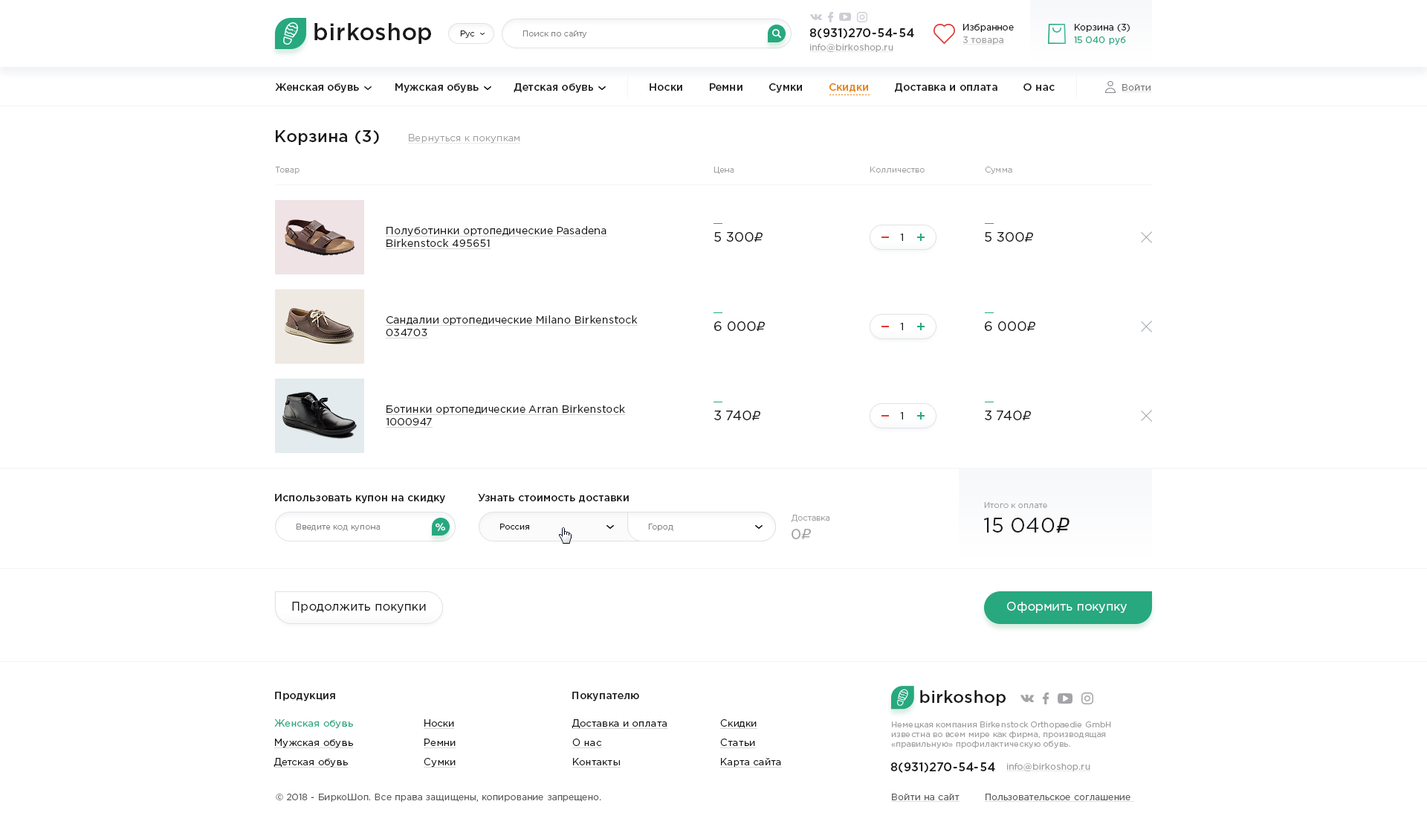
<style>
.page{position:relative;width:1427px;height:836px;background:#ffffff}
.page>*{position:absolute;margin:0}
.t1{font:23px "GothamPro-Medium";letter-spacing:0.02em;color:#19191a}
.t2{font:11.9px "GothamPro-Medium";letter-spacing:0.02em;color:#19191a}
.t3{font:8.9px "GothamPro";letter-spacing:0.02em;color:#19191a}
.t4{font:8.2px "GothamPro-Light";letter-spacing:0.02em;color:#19191a}
.t5{font:8.2px "GothamPro-Light";letter-spacing:0.02em;color:#818387}
.t6{font:8.9px "GothamPro";letter-spacing:0.02em;color:#9fa0a3;text-decoration:underline}
.t7{font:8.9px "GothamPro";letter-spacing:0.02em;color:#28a57f}
.t8{font:10.4px "GothamPro-Medium";letter-spacing:0.02em;color:#19191a}
.t9{font:10.4px "GothamPro-Medium";letter-spacing:0.02em;color:#e4820d}
.t10{font:8.9px "GothamPro";letter-spacing:0.02em;color:#797b7f;text-decoration:underline}
.t11{font:16.4px "GothamPro-Medium";letter-spacing:0.02em;color:#19191a}
.t12{font:9.7px "GothamPro-Light";letter-spacing:0.02em;color:#a0a0a0;text-decoration:underline}
.t13{font:8.2px "GothamPro-Light";letter-spacing:0.02em;color:#a0a0a0}
.t14{font:10.4px "GothamPro";letter-spacing:0.02em;color:#19191a;text-decoration:underline}
.t15{font:13.4px "GothamPro";letter-spacing:0.02em;color:#19191a}
.t16{font:13.4px "ALSRubl";letter-spacing:0.02em;color:#19191a}
.t17{font:10.4px "GothamPro";letter-spacing:0.02em;color:#19191a}
.t18{font:20.8px "GothamPro";letter-spacing:0.02em;color:#19191a}
.t19{font:20.8px "ALSRubl";letter-spacing:0.02em;color:#19191a}
.t20{font:8.2px "GothamPro";letter-spacing:0.02em;color:#19191a}
.t21{font:14.9px "GothamPro";letter-spacing:0.02em;color:#a0a0a0}
.t22{font:14.9px "ALSRubl";letter-spacing:0.02em;color:#a0a0a0}
.t23{font:11.9px "GothamPro";letter-spacing:0.02em;color:#19191a}
.t24{font:11.9px "GothamPro";letter-spacing:0.02em;color:#ffffff}
.t25{font:17.1px "GothamPro-Medium";letter-spacing:0.02em;color:#19191a}
.t26{font:9.7px/19.3px "GothamPro";letter-spacing:0.02em;color:#19191a;text-decoration:underline}
.t27{font:9.7px/19.3px "GothamPro";letter-spacing:0.02em;color:#28a57f}
.t28{font:8.2px "GothamPro";letter-spacing:0.02em;color:#9fa0a3}
.t29{font:8.9px "GothamPro";letter-spacing:0.02em;color:#5f5f60}
.t30{font:8.9px "GothamPro";letter-spacing:0.02em;color:#5f5f60;text-decoration:underline}
</style>
<div class="page">
<p class="t1" style="left:314px;top:23px;width:117px;height:21px">birkoshop</p>
<p class="t2" style="left:809px;top:28px;width:105px;height:11px">8(931)270-54-54</p>
<p class="t3" style="left:963px;top:24px;width:51px;height:8px">Избранное</p>
<p class="t3" style="left:1075px;top:24px;width:55px;height:8px">Корзина (3)</p>
<p class="t4" style="left:460px;top:30px;width:15px;height:8px">Рус</p>
<p class="t5" style="left:523px;top:30px;width:63px;height:8px">Поиск по сайту</p>
<p class="t6" style="left:963px;top:36px;width:41px;height:9px">3 товара</p>
<p class="t7" style="left:1074px;top:36px;width:52px;height:9px">15 040 руб</p>
<p class="t6" style="left:809px;top:44px;width:85px;height:8px">info@birkoshop.ru</p>
<p class="t8" style="left:275px;top:83px;width:318px;height:10px">Женская обувь           Мужская обувь           Детская обувь</p>
<p class="t8" style="left:650px;top:83px;width:405px;height:10px">Носки        Ремни        Сумки        <span class="t9">Скидки</span>        Доставка и оплата        О нас</p>
<p class="t10" style="left:1122px;top:84px;width:30px;height:8px">Войти</p>
<p class="t11" style="left:276px;top:130px;width:103px;height:15px">Корзина (3)</p>
<p class="t12" style="left:408px;top:134px;width:113px;height:9px">Вернуться к покупкам</p>
<p class="t13" style="left:275px;top:167px;width:25px;height:7px">Товар</p>
<p class="t13" style="left:714px;top:167px;width:20px;height:7px">Цена</p>
<p class="t13" style="left:870px;top:167px;width:55px;height:5px">Колличество</p>
<p class="t13" style="left:985px;top:167px;width:27px;height:7px">Сумма</p>
<p class="t14" style="left:386px;top:226px;width:221px;height:23px">Полуботинки ортопедические Pasadena<br>Birkenstock 495651</p>
<p class="t15" style="left:714px;top:232px;width:49px;height:10px">5 300<span class="t16">r</span></p>
<p class="t17" style="left:900px;top:233px;width:3px;height:8px">1</p>
<p class="t15" style="left:985px;top:232px;width:48px;height:10px">5 300<span class="t16">r</span></p>
<p class="t14" style="left:386px;top:315px;width:252px;height:23px">Сандалии ортопедические Milano Birkenstock<br>034703</p>
<p class="t15" style="left:714px;top:321px;width:51px;height:10px">6 000<span class="t16">r</span></p>
<p class="t17" style="left:900px;top:323px;width:3px;height:7px">1</p>
<p class="t15" style="left:985px;top:321px;width:50px;height:10px">6 000<span class="t16">r</span></p>
<p class="t14" style="left:386px;top:404px;width:240px;height:23px">Ботинки ортопедические Arran Birkenstock<br>1000947</p>
<p class="t15" style="left:714px;top:410px;width:46px;height:10px">3 740<span class="t16">r</span></p>
<p class="t17" style="left:900px;top:412px;width:3px;height:7px">1</p>
<p class="t15" style="left:985px;top:410px;width:46px;height:10px">3 740<span class="t16">r</span></p>
<p class="t8" style="left:275px;top:494px;width:170px;height:9px">Использовать купон на скидку</p>
<p class="t8" style="left:478px;top:494px;width:151px;height:8px">Узнать стоимость доставки</p>
<p class="t13" style="left:984px;top:502px;width:63px;height:6px">Итого к оплате</p>
<p class="t13" style="left:791px;top:514px;width:39px;height:8px">Доставка</p>
<p class="t18" style="left:983px;top:517px;width:87px;height:16px">15 040<span class="t19">r</span></p>
<p class="t5" style="left:296px;top:523px;width:85px;height:8px">Введите код купона</p>
<p class="t20" style="left:500px;top:523px;width:29px;height:6px">Россия</p>
<p class="t5" style="left:648px;top:523px;width:25px;height:8px">Город</p>
<p class="t21" style="left:792px;top:529px;width:19px;height:10px">0<span class="t22">r</span></p>
<p class="t23" style="left:292px;top:601px;width:134px;height:12px">Продолжить покупки</p>
<p class="t24" style="left:1007px;top:601px;width:120px;height:12px">Оформить покупку</p>
<p class="t25" style="left:920px;top:690px;width:86px;height:15px">birkoshop</p>
<p class="t8" style="left:275px;top:691px;width:60px;height:10px">Продукция</p>
<p class="t8" style="left:572px;top:691px;width:67px;height:10px">Покупателю</p>
<p class="t26" style="left:274px;top:719px;width:80px;height:48px"><span class="t27">Женская обувь<br></span>Мужская обувь<br>Детская обувь</p>
<p class="t26" style="left:424px;top:719px;width:32px;height:48px">Носки<br>Ремни<br>Сумки</p>
<p class="t26" style="left:572px;top:719px;width:96px;height:48px">Доставка и оплата<br>О нас<br>Контакты</p>
<p class="t26" style="left:720px;top:719px;width:62px;height:48px">Скидки<br>Статьи<br>Карта сайта</p>
<p class="t28" style="left:891px;top:721px;width:220px;height:27px">Немецкая компания Birkenstock Orthopaedie GmbH известна во всем мире как фирма, производящая «правильную» профилактическую обувь.</p>
<p class="t2" style="left:891px;top:762px;width:104px;height:10px">8(931)270-54-54</p>
<p class="t6" style="left:1006px;top:763px;width:85px;height:8px">info@birkoshop.ru</p>
<p class="t29" style="left:276px;top:793px;width:325px;height:8px">© 2018 - БиркоШоп. Все права защищены, копирование запрещено.</p>
<p class="t30" style="left:891px;top:793px;width:243px;height:8px">Войти на сайт        Пользовательское соглашение</p>
</div>
